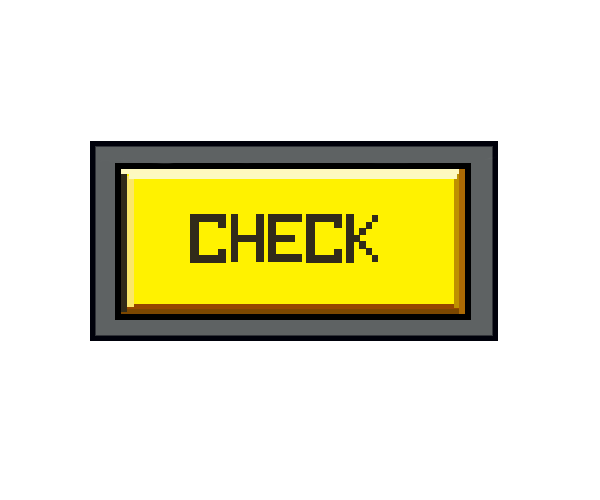
<style>
.page{position:relative;width:600px;height:500px;background:#ffffff}
.page>*{position:absolute;margin:0}
.t1{font:94.6px "14272BluemoonPixCersv.1.1";color:#312b1a;scale:1.09 1}
.t2{font:90px "14272BluemoonPixCersv.1.1";color:#312b1a}
.t3{font:72px "14272BluemoonPixCersv.1.1";color:#0b0b0b}
</style>
<div class="page">
<p class="t1" style="left:190px;top:214px;width:36px;height:49px">C</p>
<p class="t2" style="left:193px;top:215px;width:185px;height:47px"><span class="t3"> </span>CHECK</p>
<p class="t1" style="left:306px;top:214px;width:36px;height:49px">C</p>
</div>
